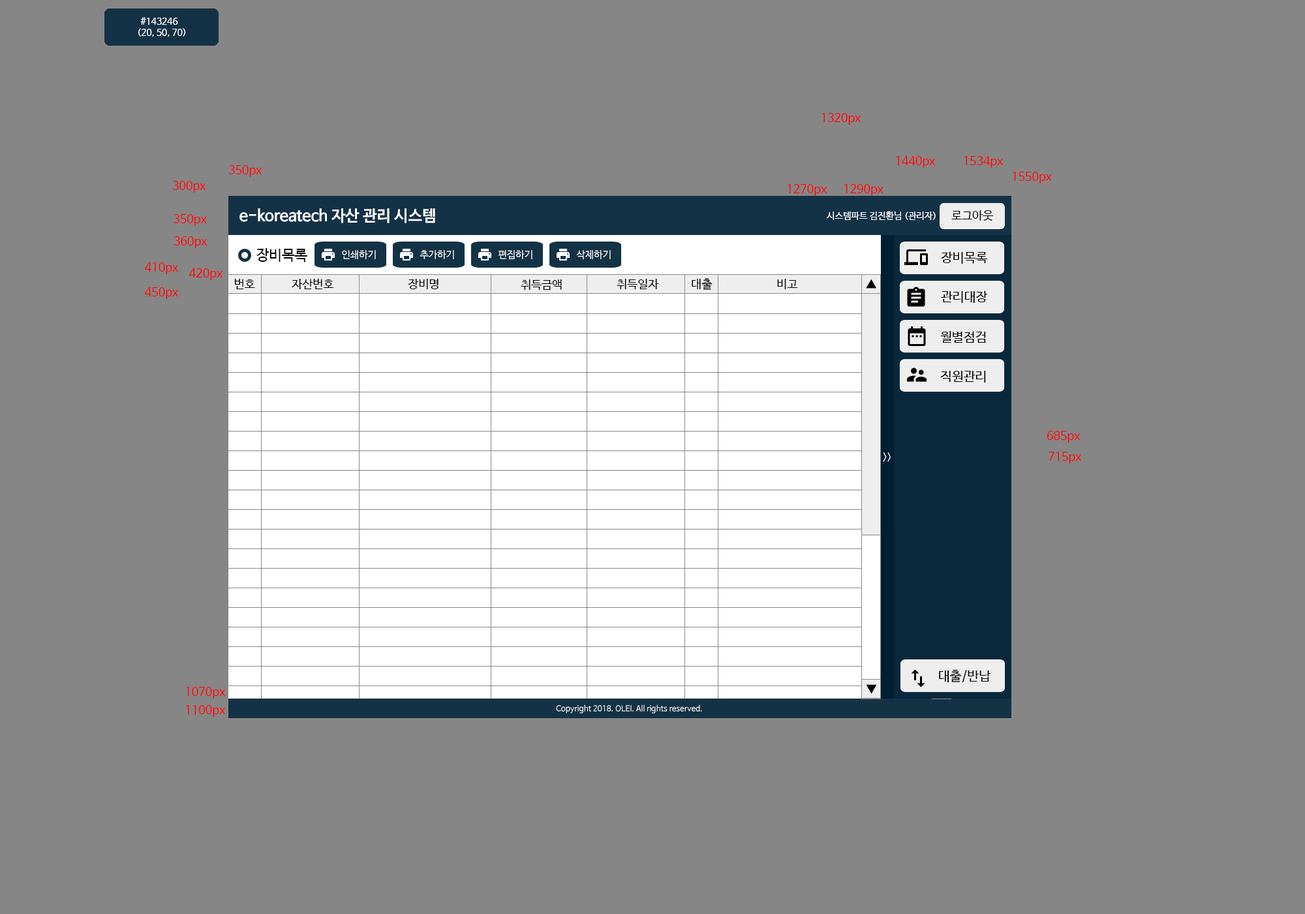
<style>
.page{position:relative;width:1305px;height:914px;background:#868686}
.page>*{position:absolute;margin:0}
.t1{font:9.1px "NanumBarunGothic";color:#ffffff}
.t2{font:11.7px "NanumBarunGothic";color:#ff0000}
.t3{font:15.7px "NanumBarunGothicBold";color:#ffffff}
.t4{font:11.7px "NanumBarunGothic";color:#000000}
.t5{font:14.4px "NanumBarunGothic";color:#000000}
.t6{font:9.8px "NanumBarunGothic";color:#ffffff}
.t7{font:13.1px "NanumBarunGothic";color:#000000}
.t8{font:11.7px "NanumBarunGothic";color:#eeeeee}
.t9{font:7.8px "NanumBarunGothic";color:#ffffff}
</style>
<div class="page">
<p class="t1" style="left:138px;top:17px;width:48px;height:20px">#143246<br>(20, 50, 70)</p>
<p class="t2" style="left:822px;top:113px;width:39px;height:12px">1320px</p>
<p class="t2" style="left:896px;top:156px;width:40px;height:12px">1440px</p>
<p class="t2" style="left:964px;top:156px;width:40px;height:12px">1534px</p>
<p class="t2" style="left:228px;top:165px;width:34px;height:12px">350px</p>
<p class="t2" style="left:1013px;top:172px;width:39px;height:11px">1550px</p>
<p class="t2" style="left:172px;top:181px;width:34px;height:12px">300px</p>
<p class="t2" style="left:788px;top:184px;width:39px;height:12px">1270px</p>
<p class="t2" style="left:844px;top:184px;width:40px;height:12px">1290px</p>
<p class="t3" style="left:239px;top:208px;width:196px;height:15px">e-koreatech 자산 관리 시스템</p>
<p class="t2" style="left:174px;top:214px;width:33px;height:12px">350px</p>
<p class="t1" style="left:826px;top:211px;width:110px;height:9px">시스템파트 김진환님 (관리자)</p>
<p class="t4" style="left:951px;top:210px;width:42px;height:11px">로그아웃</p>
<p class="t2" style="left:174px;top:236px;width:34px;height:12px">360px</p>
<p class="t5" style="left:256px;top:248px;width:51px;height:14px">장비목록</p>
<p class="t6" style="left:342px;top:250px;width:34px;height:9px">인쇄하기</p>
<p class="t6" style="left:420px;top:250px;width:34px;height:9px">추가하기</p>
<p class="t6" style="left:499px;top:250px;width:34px;height:9px">편집하기</p>
<p class="t6" style="left:576px;top:250px;width:35px;height:10px">삭제하기</p>
<p class="t7" style="left:941px;top:251px;width:47px;height:13px">장비목록</p>
<p class="t2" style="left:145px;top:262px;width:34px;height:12px">410px</p>
<p class="t2" style="left:189px;top:268px;width:34px;height:12px">420px</p>
<p class="t4" style="left:234px;top:279px;width:21px;height:10px">번호</p>
<p class="t4" style="left:292px;top:279px;width:42px;height:10px">자산번호</p>
<p class="t4" style="left:408px;top:279px;width:31px;height:10px">장비명</p>
<p class="t4" style="left:521px;top:279px;width:41px;height:11px">취득금액</p>
<p class="t4" style="left:617px;top:279px;width:42px;height:10px">취득일자</p>
<p class="t4" style="left:692px;top:278px;width:21px;height:12px">대출</p>
<p class="t4" style="left:777px;top:279px;width:21px;height:10px">비고</p>
<p class="t4" style="left:866px;top:279px;width:11px;height:9px">▲</p>
<p class="t8" style="left:936px;top:279px;width:12px;height:9px">▲</p>
<p class="t2" style="left:145px;top:287px;width:34px;height:12px">450px</p>
<p class="t7" style="left:941px;top:290px;width:47px;height:13px">관리대장</p>
<p class="t7" style="left:940px;top:331px;width:46px;height:12px">월별점검</p>
<p class="t7" style="left:940px;top:371px;width:46px;height:11px">직원관리</p>
<p class="t2" style="left:1047px;top:431px;width:34px;height:11px">685px</p>
<p class="t6" style="left:883px;top:452px;width:8px;height:9px">&gt;&gt;</p>
<p class="t2" style="left:1048px;top:452px;width:34px;height:11px">715px</p>
<p class="t7" style="left:939px;top:669px;width:52px;height:14px">대출/반납</p>
<p class="t2" style="left:186px;top:687px;width:40px;height:11px">1070px</p>
<p class="t4" style="left:866px;top:684px;width:11px;height:10px">▼</p>
<p class="t8" style="left:936px;top:684px;width:12px;height:10px">▼</p>
<p class="t2" style="left:186px;top:705px;width:40px;height:12px">1100px</p>
<p class="t9" style="left:556px;top:704px;width:146px;height:9px">Copyright 2018. OLEI. All rights reserved.</p>
</div>
